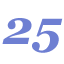
<style>
.page{position:relative;width:64px;height:64px;background:#ffffff}
.page>*{position:absolute;margin:0}
.t1{font:48px "Georgia-BoldItalic";color:#6e7fd2}
</style>
<div class="page">
<p class="t1" style="left:2px;top:18px;width:61px;height:35px">25</p>
</div>
